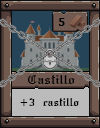
<style>
.page{position:relative;width:100px;height:128px}
.page>*{position:absolute;margin:0}
.t1{font:12px "Cambria-Bold";color:#000000}
.t2{font:12px "SWGothe";color:#000000}
.t3{font:10px "SWGothe";color:#000000}
</style>
<div class="page">
<p class="t1" style="left:58px;top:18px;width:7px;height:8px">5</p>
<p class="t2" style="left:27px;top:75px;width:48px;height:9px">Castillo</p>
<p class="t3" style="left:20px;top:98px;width:59px;height:8px">+3 castillo</p>
</div>
